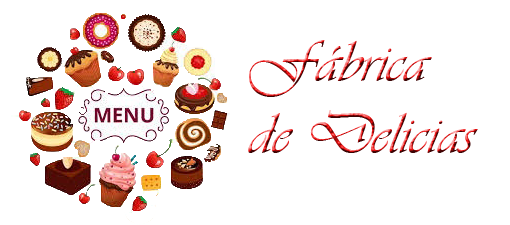
<style>
.page{position:relative;width:510px;height:225px;background:#ffffff}
.page>*{position:absolute;margin:0}
.t1{font:60px "Vivaldii"}
</style>
<div class="page">
<p class="t1" style="left:248px;top:40px;width:230px;height:113px">Fábrica <br>de Delicias</p>
</div>
